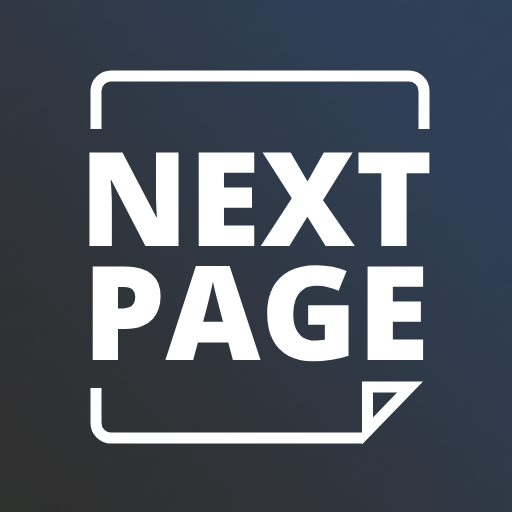
<style>
.page{position:relative;width:512px;height:512px}
.page>*{position:absolute;margin:0}
.t1{font:131px/114px "OpenSans-ExtraBold";color:#ffffff}
</style>
<div class="page">
<p class="t1" style="left:89px;top:152px;width:341px;height:210px;text-align:center">NEXT<br>PAGE</p>
</div>
